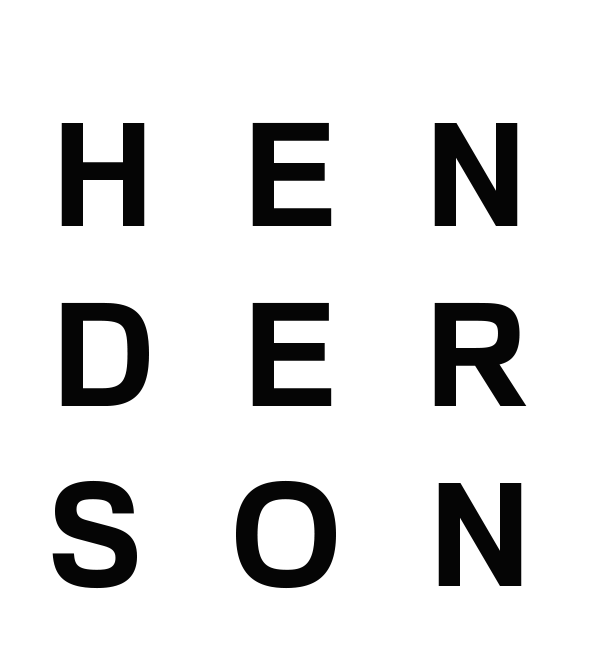
<style>
.page{position:relative;width:590px;height:670px;background:#ffffff}
.page>*{position:absolute;margin:0}
.t1{font:144px/180px "FamiliarPro-Bold";letter-spacing:0.6em;color:#050505}
</style>
<div class="page">
<p class="t1" style="left:52px;top:122px;width:475px;height:467px;text-align:center">HEN<br>DER<br>SON</p>
</div>
